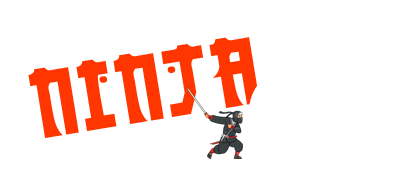
<style>
.page{position:relative;width:400px;height:180px;background:#ffffff}
.page>*{position:absolute;margin:0}
.t1{font:91.6px "Manga-Bold";letter-spacing:0.04em;color:#ff3600;text-transform:uppercase}
</style>
<div class="page">
<p class="t1" style="left:28px;top:37px;width:232px;height:101px;rotate:-9deg">NINJA</p>
</div>
